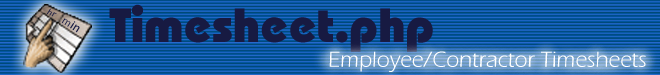
<style>
.page{position:relative;width:660px;height:75px}
.page>*{position:absolute;margin:0}
.t1{font:48px "BahamasHeavyPSMT";color:#171a42}
.t2{font:22.5px "ItcEras-Book";color:#ffffff}
</style>
<div class="page">
<p class="t1" style="left:109px;top:4px;width:324px;height:48px">Timesheet.php</p>
<p class="t2" style="left:329px;top:51px;width:317px;height:21px">Employee/Contractor Timesheets</p>
</div>
